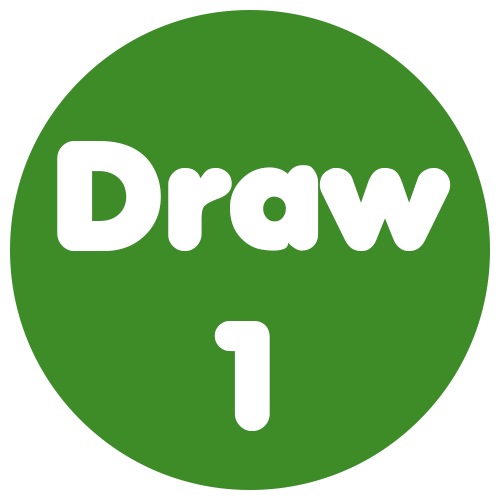
<style>
.page{position:relative;width:500px;height:500px;background:#3d8c28}
.page>*{position:absolute;margin:0}
.t1{font:150px "Valken";color:#ffffff}
</style>
<div class="page">
<p class="t1" style="left:57px;top:141px;width:394px;height:290px;text-align:center">Draw<br>1</p>
</div>
